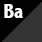
<style>
.page{position:relative;width:42px;height:42px;background:#333333}
.page>*{position:absolute;margin:0}
.t1{font:20px "AbadiMT-CondensedExtraBold";color:#ffffff}
</style>
<div class="page">
<p class="t1" style="left:4px;top:4px;width:19px;height:14px">Ba</p>
</div>
